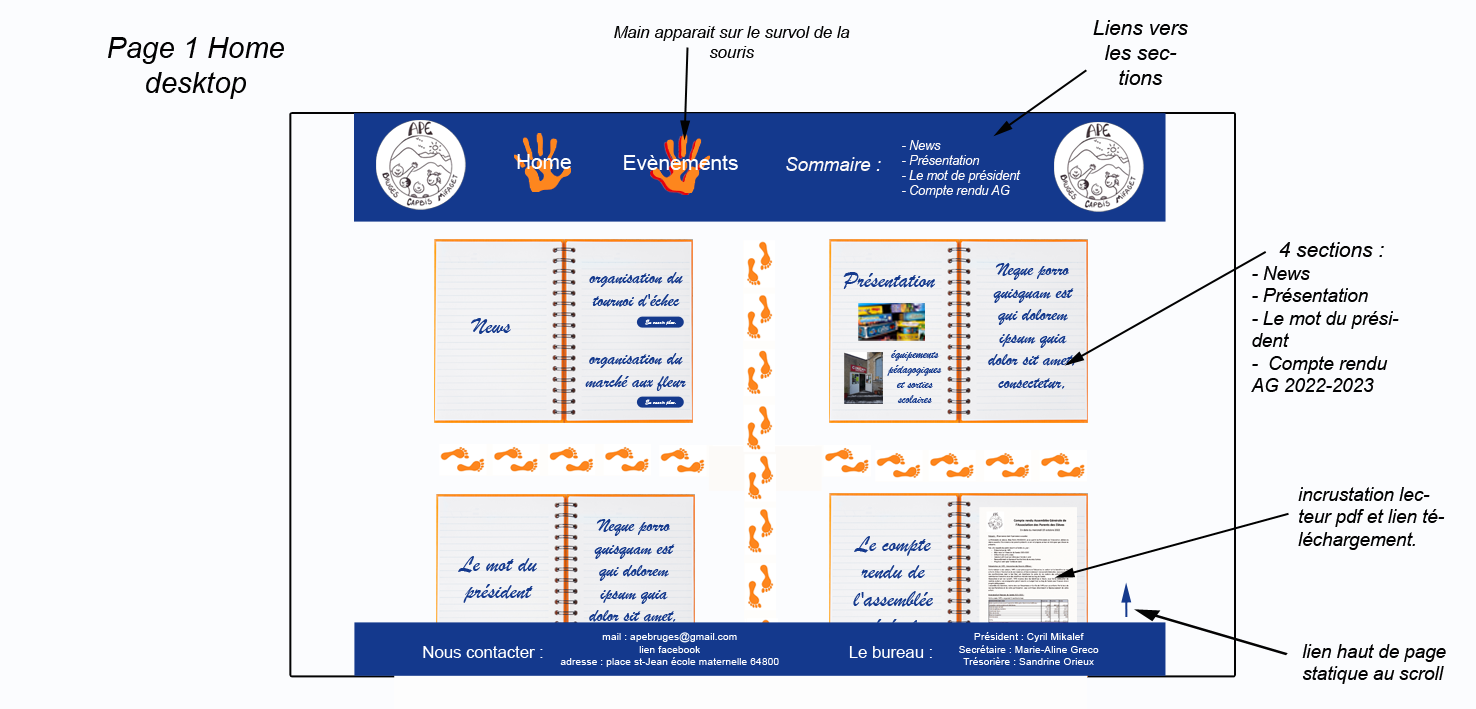
<style>
.page{position:relative;width:1476px;height:709px;background:#fbfcfe}
.page>*{position:absolute;margin:0}
.t1{font:16.7px "Arial-ItalicMT";color:#020202}
.t2{font:20.8px "Arial-ItalicMT";color:#020202}
.t3{font:29.2px "Arial-ItalicMT";color:#020202}
.t4{font:12.5px "Arial-ItalicMT";color:#fbf8f8}
.t5{font:20.8px "ArialMT";color:#fdfeff}
.t6{font:18.8px "Arial-ItalicMT";color:#fbf8f8}
.t7{font:18.7px "Arial-ItalicMT";color:#020202}
.t8{font:18.8px "BrushScriptMT";color:#14398d}
.t9{font:22.9px "BrushScriptMT";color:#14398d}
.t10{font:6.2px "BrushScriptMT";color:#ffffff}
.t11{font:6.2px "BrushScriptMT";color:#14398d}
.t12{font:12.5px "BrushScriptMT";color:#14398d}
.t13{font:18.8px "Arial-ItalicMT";color:#020202}
.t14{font:10.4px "ArialMT";color:#ffffff}
.t15{font:16.7px "ArialMT";color:#ffffff}
</style>
<div class="page">
<p class="t1" style="left:614px;top:26px;width:236px;height:32px;text-align:center">Main apparait sur le survol de la souris</p>
<p class="t2" style="left:1093px;top:20px;width:95px;height:65px;text-align:center">Liens vers les sections</p>
<p class="t3" style="left:108px;top:37px;width:176px;height:62px;text-align:center">Page 1 Home<br>desktop</p>
<p class="t4" style="left:902px;top:140px;width:119px;height:58px">- News <br>- Présentation  <br>- Le mot de président <br>- Compte rendu AG</p>
<p class="t5" style="left:517px;top:154px;width:54px;height:15px">Home</p>
<p class="t5" style="left:624px;top:155px;width:114px;height:15px">Evènements</p>
<p class="t6" style="left:786px;top:157px;width:95px;height:14px">Sommaire :</p>
<p class="t7" style="left:1251px;top:242px;width:148px;height:150px;text-align:center"><span class="t2">4 sections :<br></span>- News<br>- Présentation<br>- Le mot du président<br>-  Compte rendu AG 2022-2023</p>
<p class="t8" style="left:988px;top:263px;width:87px;height:126px;text-align:center">Neque porro quisquam est qui dolorem ipsum quia  dolor sit amet, consectetur, adipisci velit...</p>
<p class="t8" style="left:589px;top:272px;width:94px;height:35px;text-align:center">organisation du tournoi d'échec</p>
<p class="t9" style="left:843px;top:272px;width:93px;height:17px">Présentation</p>
<p class="t9" style="left:471px;top:318px;width:40px;height:16px">News</p>
<p class="t10" style="left:645px;top:319px;width:35px;height:6px">En savoir plus.<span class="t11">..</span></p>
<p class="t8" style="left:585px;top:353px;width:101px;height:38px;text-align:center">organisation du marché aux fleur</p>
<p class="t12" style="left:887px;top:350px;width:55px;height:53px;text-align:center">équipements pédagogiques et sorties scolaires</p>
<p class="t10" style="left:645px;top:399px;width:35px;height:6px">En savoir plus.<span class="t11">..</span></p>
<p class="t13" style="left:1298px;top:487px;width:147px;height:63px">incrustation lecteur pdf et lien téléchargement.</p>
<p class="t8" style="left:589px;top:519px;width:87px;height:126px;text-align:center">Neque porro quisquam est qui dolorem ipsum quia  dolor sit amet, consectetur, adipisci velit...</p>
<p class="t9" style="left:853px;top:536px;width:80px;height:102px;text-align:center">Le compte rendu de l'assemblée générale</p>
<p class="t9" style="left:458px;top:556px;width:79px;height:47px;text-align:center">Le mot du président</p>
<p class="t14" style="left:560px;top:632px;width:219px;height:35px;text-align:center">mail : apebruges@gmail.com  <br>lien facebook <br>adresse : place st-Jean école maternelle 64800 Bruges</p>
<p class="t14" style="left:959px;top:632px;width:140px;height:33px;text-align:center">Président : Cyril Mikalef<br>Secrétaire : Marie-Aline Greco<br>Trésorière : Sandrine Orieux</p>
<p class="t15" style="left:423px;top:646px;width:120px;height:12px">Nous contacter :</p>
<p class="t15" style="left:849px;top:646px;width:83px;height:12px">Le bureau :</p>
<p class="t13" style="left:1302px;top:644px;width:144px;height:40px">lien haut de page statique au scroll</p>
</div>
